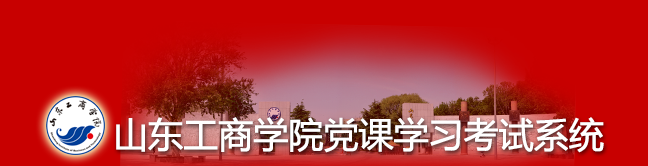
<style>
.page{position:relative;width:648px;height:166px;background:#c80000}
.page>*{position:absolute;margin:0}
.t1{font:35px "MicrosoftYaHei";letter-spacing:-0.025em;color:#ffffff;font-weight:bold}
</style>
<div class="page">
<p class="t1" style="left:116px;top:117px;width:488px;height:36px">山东工商学院党课学习考试系统</p>
</div>
